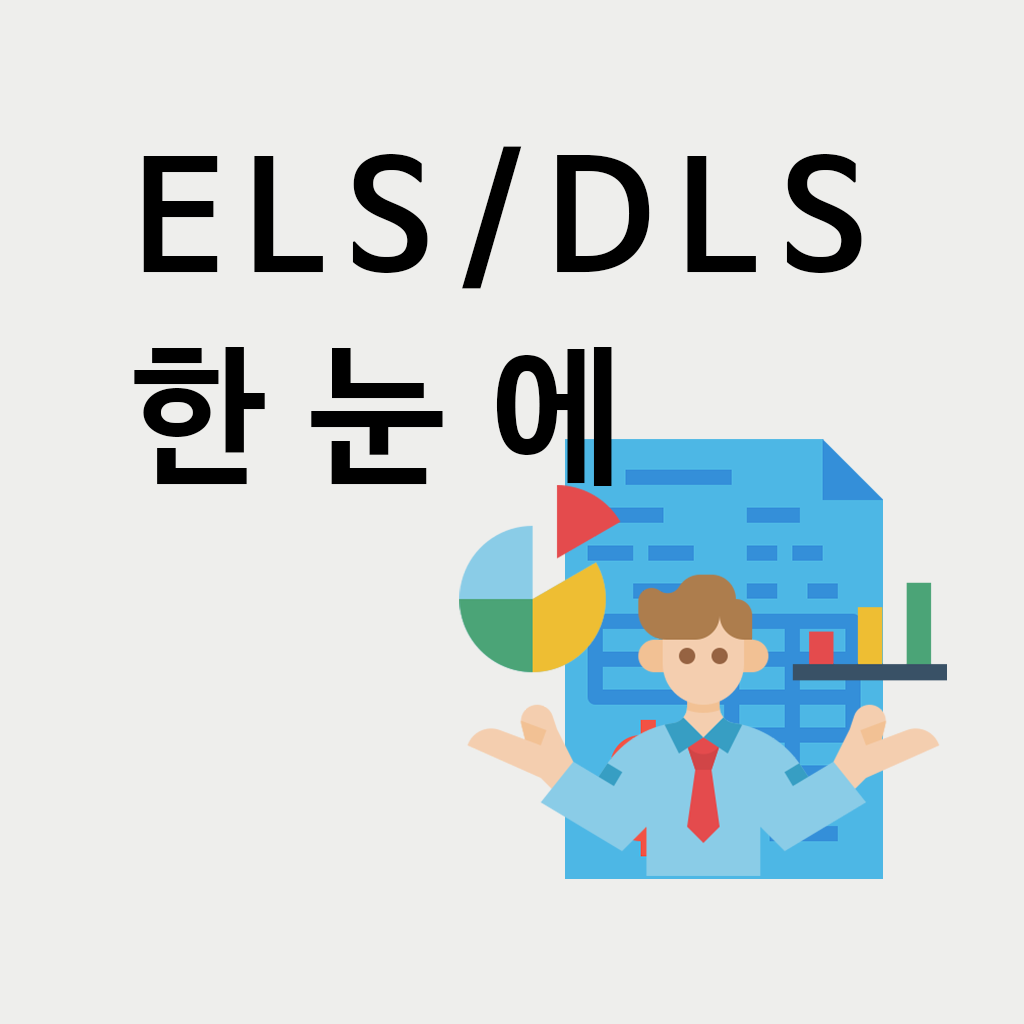
<style>
.page{position:relative;width:1024px;height:1024px;background:#eeeeec}
.page>*{position:absolute;margin:0}
.t1{font:150px/200px "NanumBarunGothicBold";letter-spacing:0.15em;color:#000000}
.t2{font:150px/200px "NanumBarunGothicBold";letter-spacing:0.3em;color:#000000}
</style>
<div class="page">
<p class="t1" style="left:134px;top:146px;width:728px;height:340px">ELS/DLS<br><span class="t2">한눈에</span></p>
</div>
